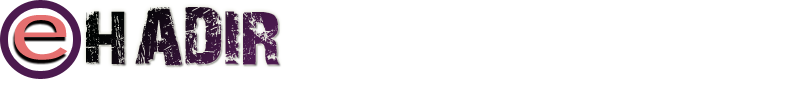
<style>
.page{position:relative;width:800px;height:100px;background:#ffffff}
.page>*{position:absolute;margin:0}
.t1{font:82px "EuphemiaCAS";letter-spacing:-0.1em;color:#e57070;scale:1.45 1}
.t2{font:75px "28DaysLater";text-transform:uppercase;scale:1.07 1}
</style>
<div class="page">
<p class="t1" style="left:14px;top:15px;width:54px;height:45px">e</p>
<p class="t2" style="left:86px;top:7px;width:194px;height:59px">HADIR</p>
</div>
